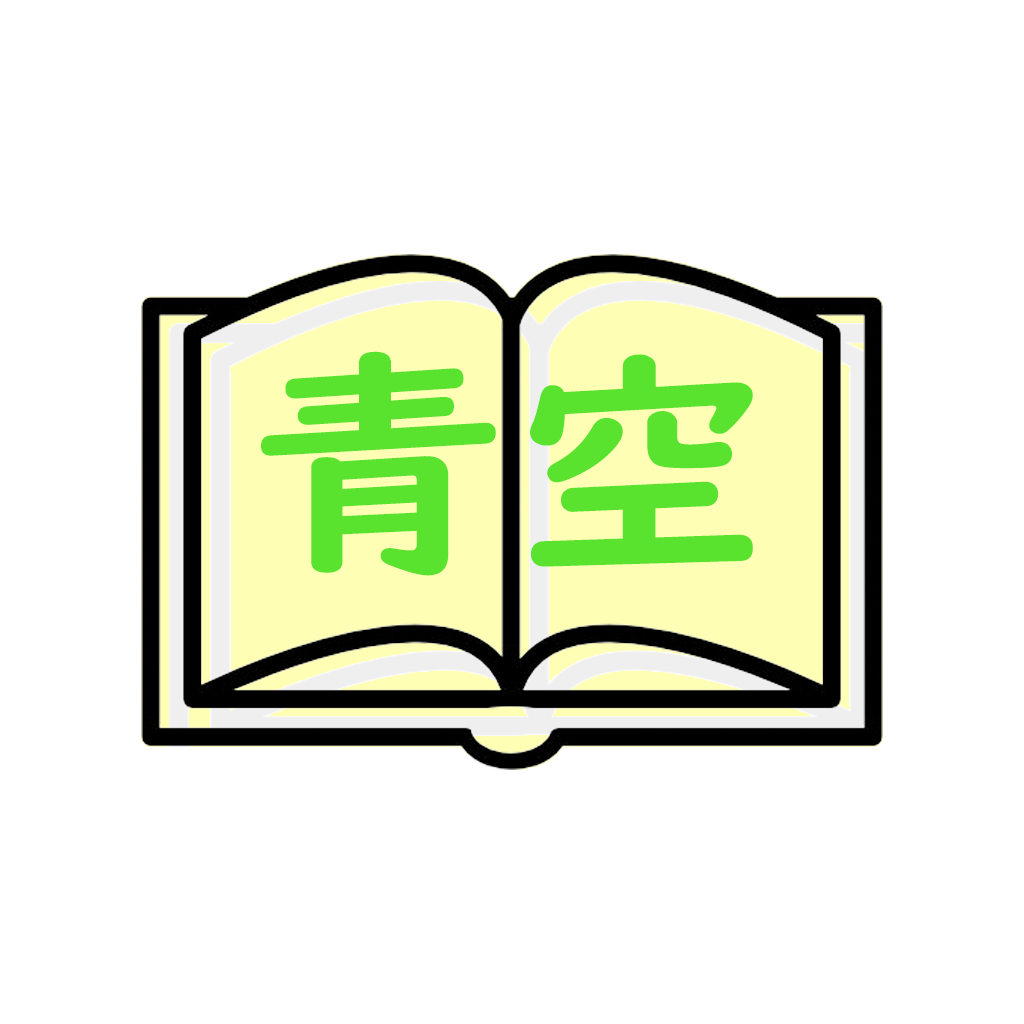
<style>
.page{position:relative;width:1024px;height:1024px;background:#ffffff}
.page>*{position:absolute;margin:0}
.t1{font:239.9px "UDDigiKyokashoN-B";color:#59e32e;scale:1.09 1}
</style>
<div class="page">
<p class="t1" style="left:261px;top:351px;width:492px;height:225px">青空</p>
</div>
